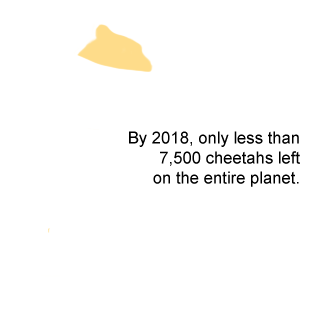
<style>
.page{position:relative;width:326px;height:326px;background:#ffffff}
.page>*{position:absolute;margin:0}
.t1{font:16.7px "ArialMT";color:#000000}
</style>
<div class="page">
<p class="t1" style="left:129px;top:131px;width:171px;height:56px;text-align:right">By 2018, only less than<br>7,500 cheetahs left<br>on the entire planet.</p>
</div>
